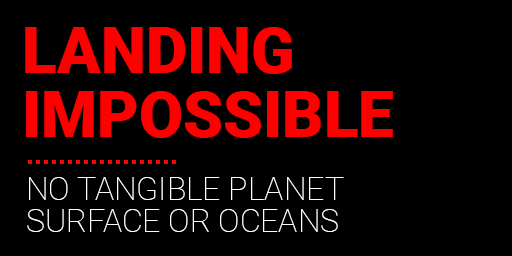
<style>
.page{position:relative;width:512px;height:256px;background:#000000}
.page>*{position:absolute;margin:0}
.t1{font:64px/32px "Roboto-Black";color:#ff0000;text-transform:uppercase}
.t2{font:32px/32px "Roboto-Thin";color:#ffffff;text-transform:uppercase}
</style>
<div class="page">
<p class="t1" style="left:25px;top:27px;width:368px;height:111px">LANDING<br><br>IMPOSSIBLE</p>
<p class="t2" style="left:27px;top:177px;width:317px;height:55px">NO TANGIBLE PLANET<br>SURFACE OR OCEANS</p>
</div>
